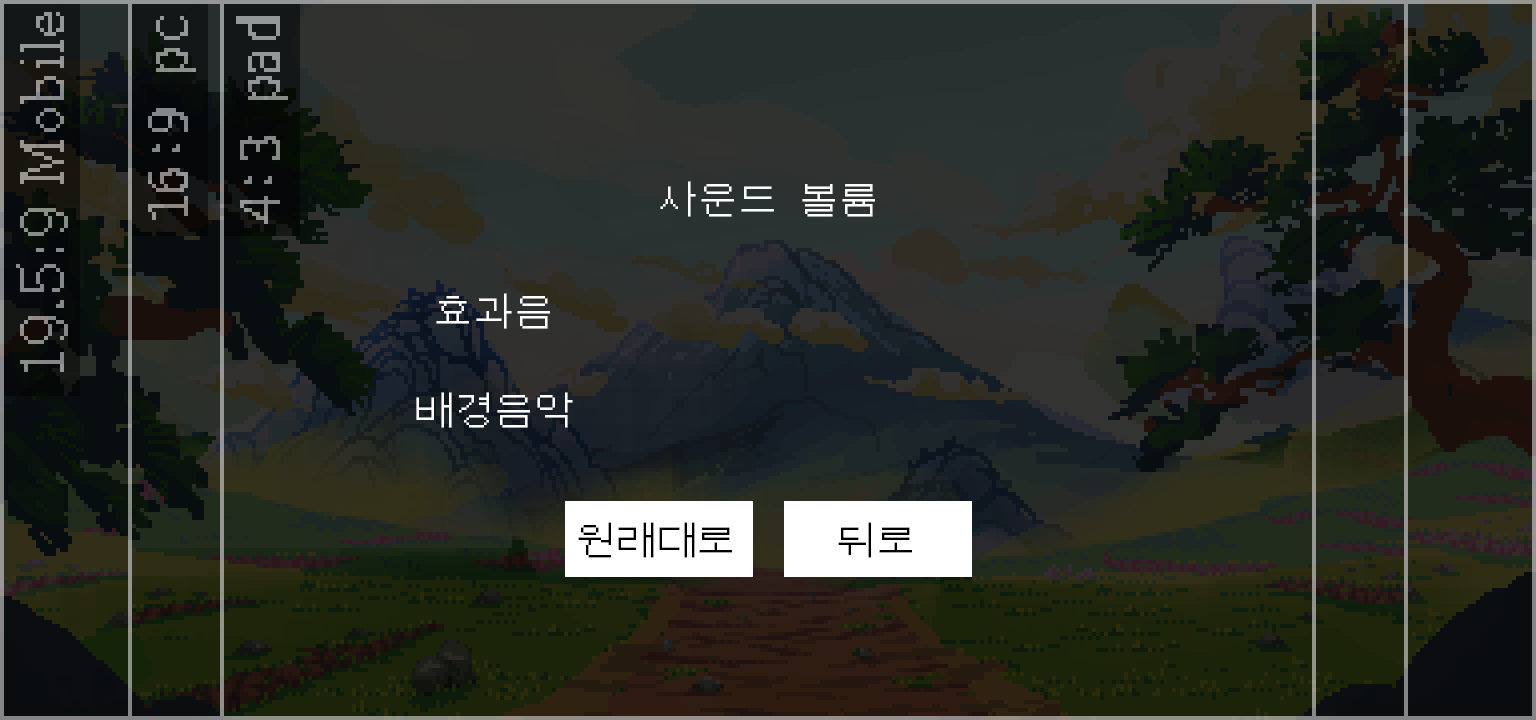
<style>
.page{position:relative;width:1536px;height:720px}
.page>*{position:absolute;margin:0}
.t1{font:40px "DOSGothic";letter-spacing:0.01em;color:#ffffff}
.t2{font:40px "DOSGothic";letter-spacing:0.01em;color:#000000}
</style>
<div class="page">
<p class="t1" style="left:660px;top:181px;width:215px;height:36px">사운드 볼륨</p>
<p class="t1" style="left:436px;top:293px;width:114px;height:36px">효과음</p>
<p class="t1" style="left:416px;top:392px;width:157px;height:36px">배경음악</p>
<p class="t2" style="left:578px;top:522px;width:154px;height:36px">원래대로</p>
<p class="t2" style="left:838px;top:522px;width:74px;height:36px">뒤로</p>
</div>
